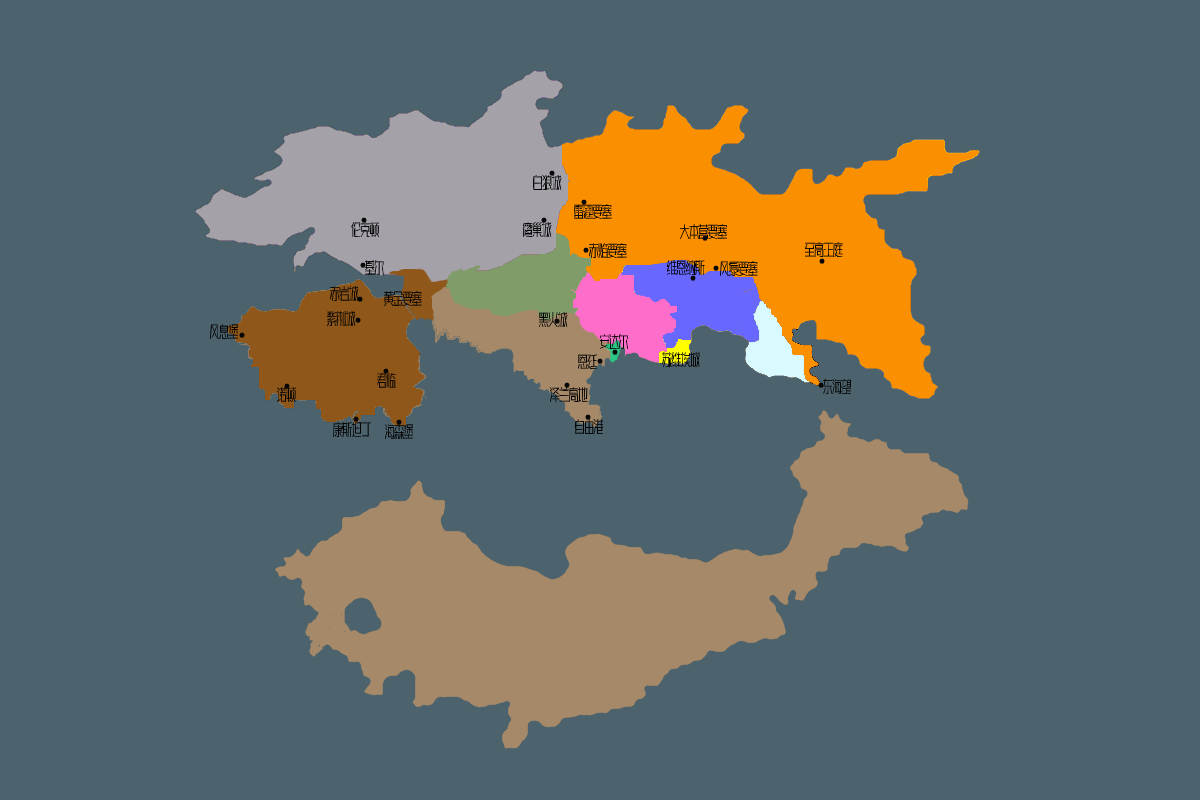
<style>
.page{position:relative;width:1200px;height:800px;background:#4c636d}
.page>*{position:absolute;margin:0}
.t1{font:15px "HuXiaoBo-ZhenShuai";color:#000000}
</style>
<div class="page">
<p class="t1" style="left:533px;top:175px;width:29px;height:15px">白狼城</p>
<p class="t1" style="left:574px;top:204px;width:38px;height:15px">雷霆要塞</p>
<p class="t1" style="left:351px;top:222px;width:29px;height:15px">伦克顿</p>
<p class="t1" style="left:523px;top:222px;width:29px;height:15px">鹰巢城</p>
<p class="t1" style="left:680px;top:224px;width:47px;height:15px">大本营要塞</p>
<p class="t1" style="left:589px;top:243px;width:38px;height:15px">赤焰要塞</p>
<p class="t1" style="left:805px;top:242px;width:38px;height:15px">至高王庭</p>
<p class="t1" style="left:365px;top:260px;width:19px;height:15px">基尔</p>
<p class="t1" style="left:667px;top:260px;width:38px;height:15px">维恩纳斯</p>
<p class="t1" style="left:720px;top:261px;width:38px;height:15px">风暴要塞</p>
<p class="t1" style="left:330px;top:286px;width:29px;height:15px">赤岩城</p>
<p class="t1" style="left:384px;top:291px;width:38px;height:15px">黄金要塞</p>
<p class="t1" style="left:327px;top:311px;width:29px;height:15px">紫荆城</p>
<p class="t1" style="left:539px;top:312px;width:29px;height:15px">黑火城</p>
<p class="t1" style="left:210px;top:324px;width:29px;height:15px">风息堡</p>
<p class="t1" style="left:600px;top:334px;width:29px;height:15px">安达尔</p>
<p class="t1" style="left:662px;top:352px;width:38px;height:15px">苏维埃城</p>
<p class="t1" style="left:578px;top:354px;width:19px;height:15px">恩廷</p>
<p class="t1" style="left:377px;top:373px;width:19px;height:15px">君临</p>
<p class="t1" style="left:277px;top:387px;width:19px;height:15px">诺顿</p>
<p class="t1" style="left:550px;top:387px;width:38px;height:15px">泽兰高地</p>
<p class="t1" style="left:823px;top:379px;width:29px;height:15px">东海望</p>
<p class="t1" style="left:333px;top:422px;width:38px;height:15px">康斯坦丁</p>
<p class="t1" style="left:385px;top:424px;width:29px;height:15px">海森堡</p>
<p class="t1" style="left:575px;top:419px;width:29px;height:15px">自由港</p>
</div>
